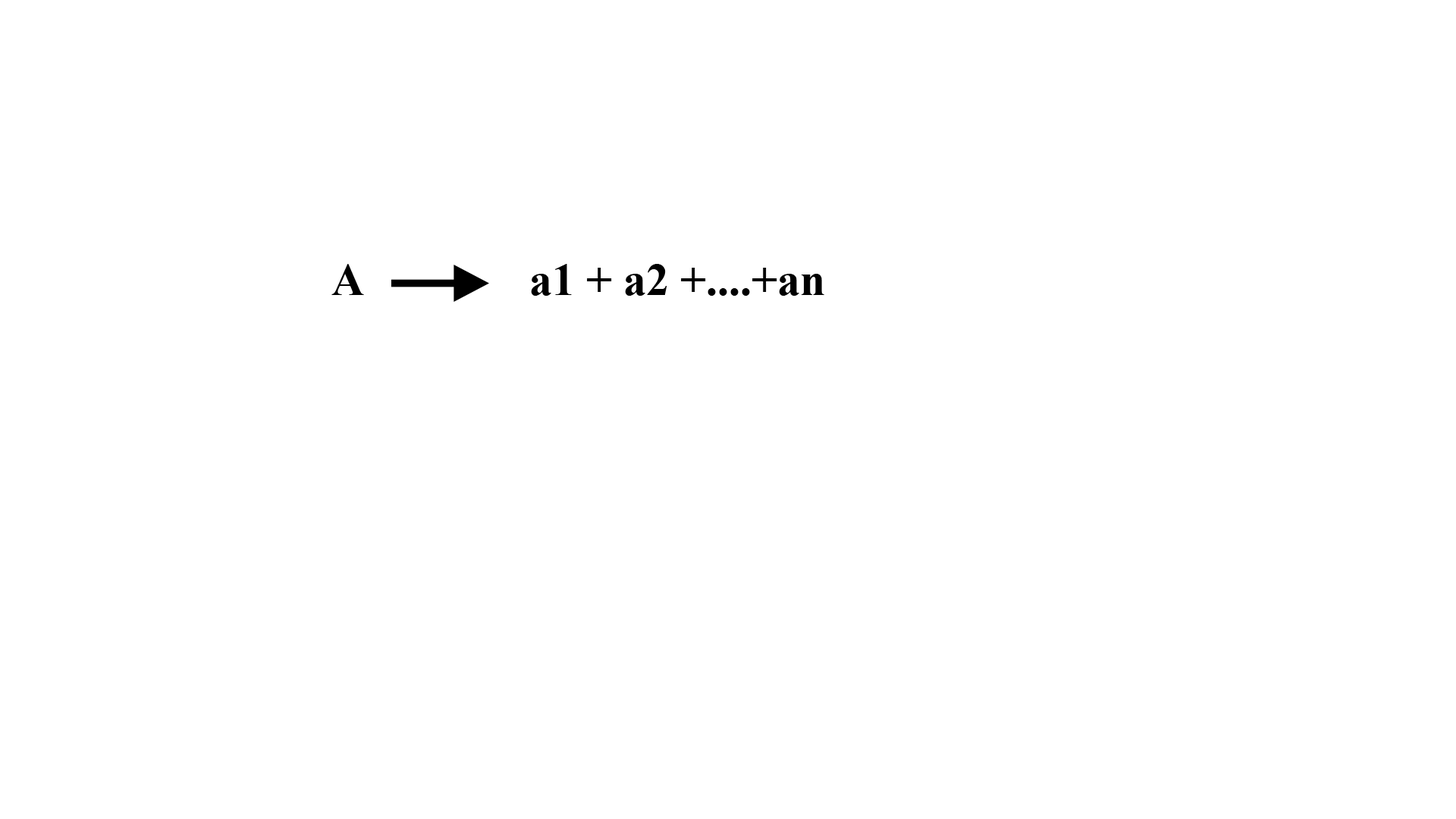
<style>
.page{position:relative;width:1456px;height:819px;background:#ffffff}
.page>*{position:absolute;margin:0}
.t1{font:45.5px "TimesNewRomanPS-BoldMT";color:#000000}
</style>
<div class="page">
<p class="t1" style="left:331px;top:264px;width:33px;height:31px">A</p>
<p class="t1" style="left:531px;top:264px;width:293px;height:32px">a1 + a2 +....+an</p>
</div>
